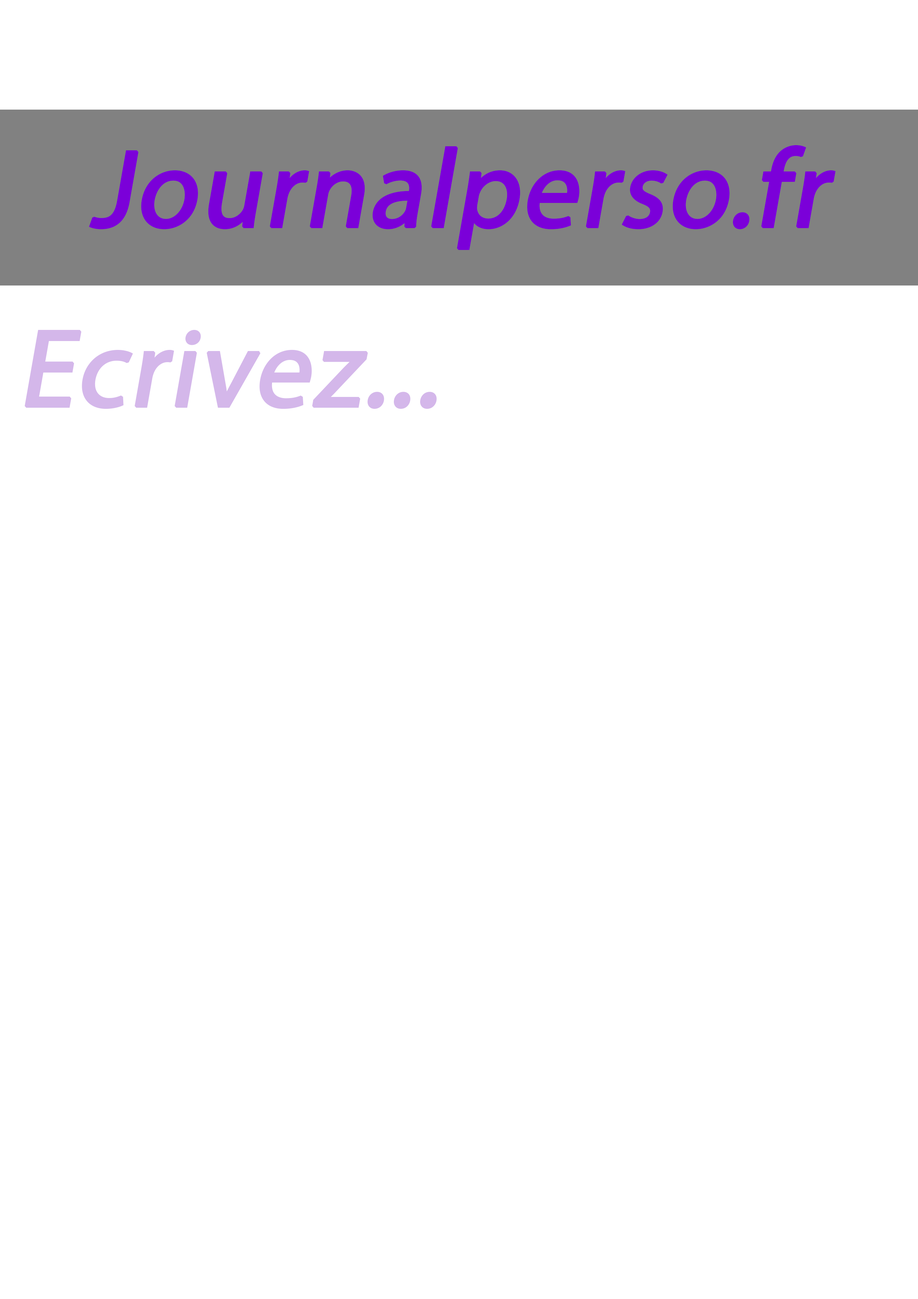
<style>
.page{position:relative;width:918px;height:1299px;background:#ffffff}
.page>*{position:absolute;margin:0}
.t1{font:111.1px "MyriadPro-Regular";color:#7b00d9;font-weight:bold;font-style:italic}
.t2{font:111.1px "MyriadPro-Regular";color:#d4b7ea;font-weight:bold;font-style:italic}
</style>
<div class="page">
<p class="t1" style="left:89px;top:145px;width:747px;height:105px">Journalperso.fr</p>
<p class="t2" style="left:24px;top:329px;width:413px;height:80px">Ecrivez...</p>
</div>
